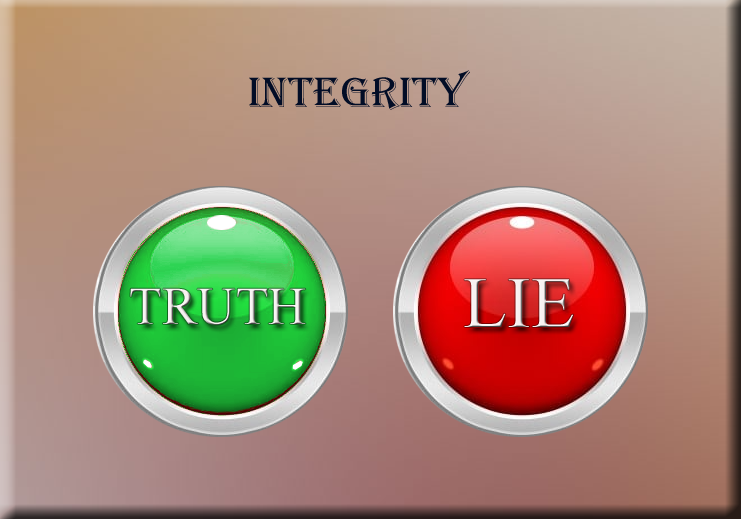
<style>
.page{position:relative;width:741px;height:519px}
.page>*{position:absolute;margin:0}
.t1{font:44px "Algerian";color:#020d26}
.t2{font:72px "TimesNewRomanPSMT";color:#f7f1f1}
.t3{font:53.3px "TimesNewRomanPSMT";color:#f7f1f1}
</style>
<div class="page">
<p class="t1" style="left:249px;top:70px;width:221px;height:40px">Integrity</p>
<p class="t2" style="left:464px;top:279px;width:110px;height:48px">LIE</p>
<p class="t3" style="left:130px;top:288px;width:176px;height:37px">TRUTH</p>
</div>
